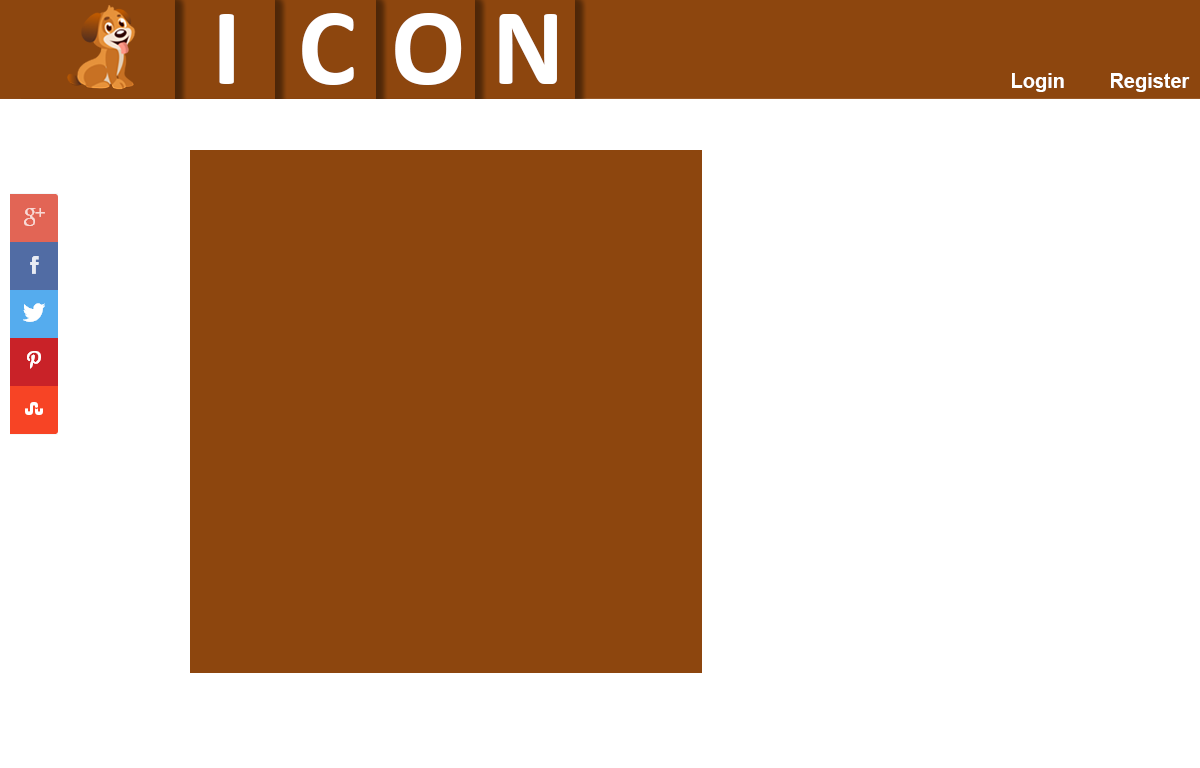
<style>
.page{position:relative;width:1200px;height:768px;background:#ffffff}
.page>*{position:absolute;margin:0}
.t1{font:110px "Calibri-Bold";color:#ffffff}
.t2{font:20px "Arial-BoldMT";color:#ffffff}
</style>
<div class="page">
<p class="t1" style="left:219px;top:14px;width:15px;height:70px">I</p>
<p class="t1" style="left:302px;top:13px;width:52px;height:72px">C</p>
<p class="t1" style="left:395px;top:13px;width:67px;height:72px">O</p>
<p class="t1" style="left:499px;top:14px;width:58px;height:70px">N</p>
<p class="t2" style="left:1012px;top:73px;width:178px;height:19px">Login        Register</p>
</div>
